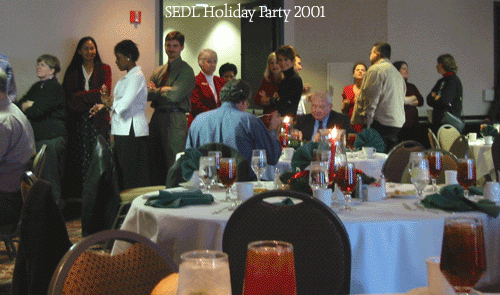
<style>
.page{position:relative;width:500px;height:295px}
.page>*{position:absolute;margin:0}
.t1{font:16.2px "ObeliskITC-Light";letter-spacing:-0.025em;color:#ffffff}
</style>
<div class="page">
<p class="t1" style="left:165px;top:3px;width:161px;height:19px">SEDL Holiday Party 2001</p>
</div>
